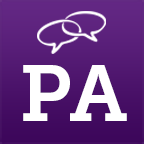
<style>
.page{position:relative;width:144px;height:144px}
.page>*{position:absolute;margin:0}
.t1{font:79.2px "MuseoSlab-700";color:#ffffff}
</style>
<div class="page">
<p class="t1" style="left:23px;top:65px;width:104px;height:56px">PA</p>
</div>
